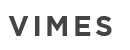
<style>
.page{position:relative;width:130px;height:50px;background:#ffffff}
.page>*{position:absolute;margin:0}
.t1{font:28px "GothamBold";letter-spacing:0.12em;color:#454343;text-transform:uppercase}
</style>
<div class="page">
<p class="t1" style="left:8px;top:16px;width:104px;height:20px">vimes</p>
</div>
